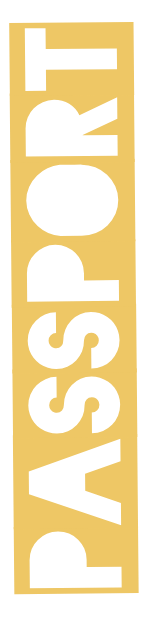
<style>
.page{position:relative;width:148px;height:634px;background:#ffffff}
.page>*{position:absolute;margin:0}
.t1{font:148.2px "Blackout-2AM";color:#eec765}
</style>
<div class="page">
<p class="t1" style="left:9px;top:21px;width:130px;height:574px;rotate:-91deg">PASSPORT</p>
</div>
